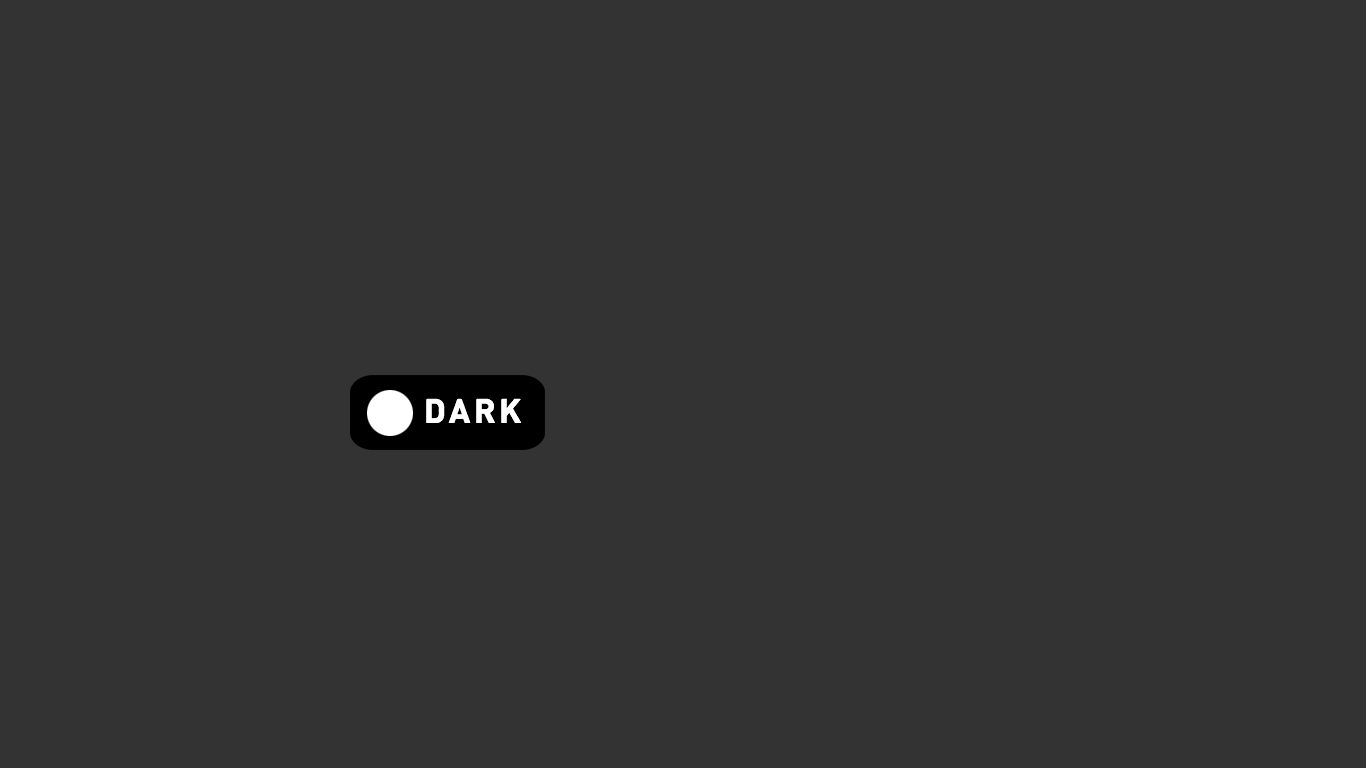
<style>
.page{position:relative;width:1366px;height:768px;background:#333333}
.page>*{position:absolute;margin:0}
.t1{font:33px "DINBold";letter-spacing:0.1em;color:#ffffff}
</style>
<div class="page">
<p class="t1" style="left:426px;top:398px;width:95px;height:25px">DARK</p>
</div>
